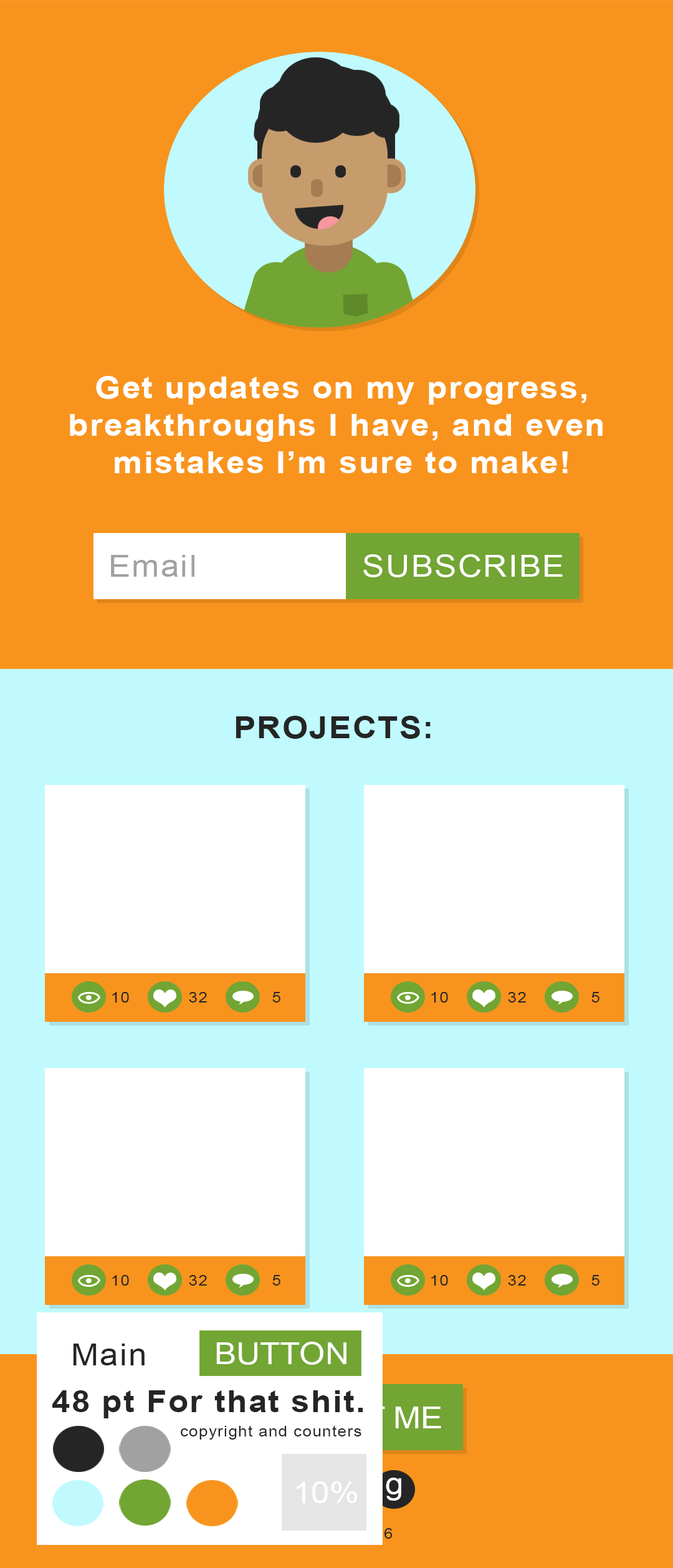
<style>
.page{position:relative;width:673px;height:1568px;background:#f8941d}
.page>*{position:absolute;margin:0}
.t1{font:29.9px/37.4px "Arial-BoldMT";letter-spacing:0.045em;color:#ffffff;scale:1.1 1}
.t2{font:29.9px "ArialMT";letter-spacing:0.045em;color:#a1a1a1;scale:1.1 1}
.t3{font:29.9px "ArialMT";letter-spacing:0.045em;color:#ffffff;scale:1.1 1}
.t4{font:29.9px "Arial-BoldMT";letter-spacing:0.045em;color:#252525;scale:1.1 1}
.t5{font:15px "ArialMT";letter-spacing:0.045em;color:#252525;scale:1.1 1}
.t6{font:29.9px "ArialMT";letter-spacing:0.045em;color:#252525;scale:1.1 1}
.t7{font:29.9px "ArialMT";color:#ffffff;scale:1.1 1}
.t8{font:29.9px "ArialMT";letter-spacing:-0.01em;color:#ffffff;scale:1.1 1}
</style>
<div class="page">
<p class="t1" style="left:70px;top:376px;width:533px;height:97px;text-align:center">Get updates on my progress,<br>breakthroughs I have, and even <br>mistakes I’m sure to make!</p>
<p class="t2" style="left:111px;top:555px;width:84px;height:22px">Email</p>
<p class="t3" style="left:363px;top:554px;width:200px;height:23px">SUBSCRIBE</p>
<p class="t4" style="left:236px;top:716px;width:195px;height:23px">PROJECTS:</p>
<p class="t5" style="left:112px;top:992px;width:17px;height:11px">10</p>
<p class="t5" style="left:189px;top:992px;width:18px;height:11px">32</p>
<p class="t5" style="left:272px;top:992px;width:9px;height:11px">5</p>
<p class="t5" style="left:431px;top:992px;width:17px;height:11px">10</p>
<p class="t5" style="left:508px;top:992px;width:18px;height:11px">32</p>
<p class="t5" style="left:592px;top:992px;width:8px;height:11px">5</p>
<p class="t5" style="left:112px;top:1275px;width:17px;height:11px">10</p>
<p class="t5" style="left:189px;top:1275px;width:18px;height:11px">32</p>
<p class="t5" style="left:272px;top:1275px;width:9px;height:11px">5</p>
<p class="t5" style="left:431px;top:1275px;width:17px;height:11px">10</p>
<p class="t5" style="left:508px;top:1275px;width:18px;height:11px">32</p>
<p class="t5" style="left:592px;top:1275px;width:8px;height:11px">5</p>
<p class="t6" style="left:73px;top:1344px;width:72px;height:21px">Main</p>
<p class="t7" style="left:216px;top:1342px;width:131px;height:23px">BUTTON</p>
<p class="t4" style="left:52px;top:1390px;width:311px;height:28px">48 pt For that shit.</p>
<p class="t5" style="left:181px;top:1425px;width:181px;height:15px">copyright and counters</p>
<p class="t7" style="left:296px;top:1481px;width:61px;height:22px">10%</p>
<p class="t8" style="left:386px;top:1478px;width:16px;height:23px">g</p>
</div>
